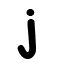
<style>
.page{position:relative;width:64px;height:64px;background:#ffffff}
.page>*{position:absolute;margin:0}
.t1{font:12px "ComicSansMS-Bold";color:#000000}
</style>
<div class="page">
<p class="t1" style="left:17px;top:9px;width:19px;height:50px">j</p>
</div>
